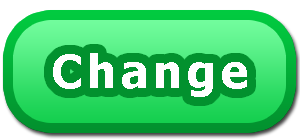
<style>
.page{position:relative;width:300px;height:140px}
.page>*{position:absolute;margin:0}
.t1{font:45.8px "Tahoma-Bold";letter-spacing:0.1em;color:#ffffff}
</style>
<div class="page">
<p class="t1" style="left:53px;top:53px;width:194px;height:44px">Change</p>
</div>
